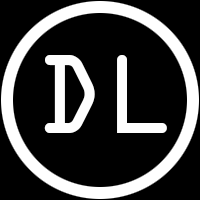
<style>
.page{position:relative;width:200px;height:200px;background:#000000}
.page>*{position:absolute;margin:0}
.t1{font:120px "OCRAExtended";color:#fefefe}
</style>
<div class="page">
<p class="t1" style="left:44px;top:55px;width:123px;height:78px">DL</p>
</div>
